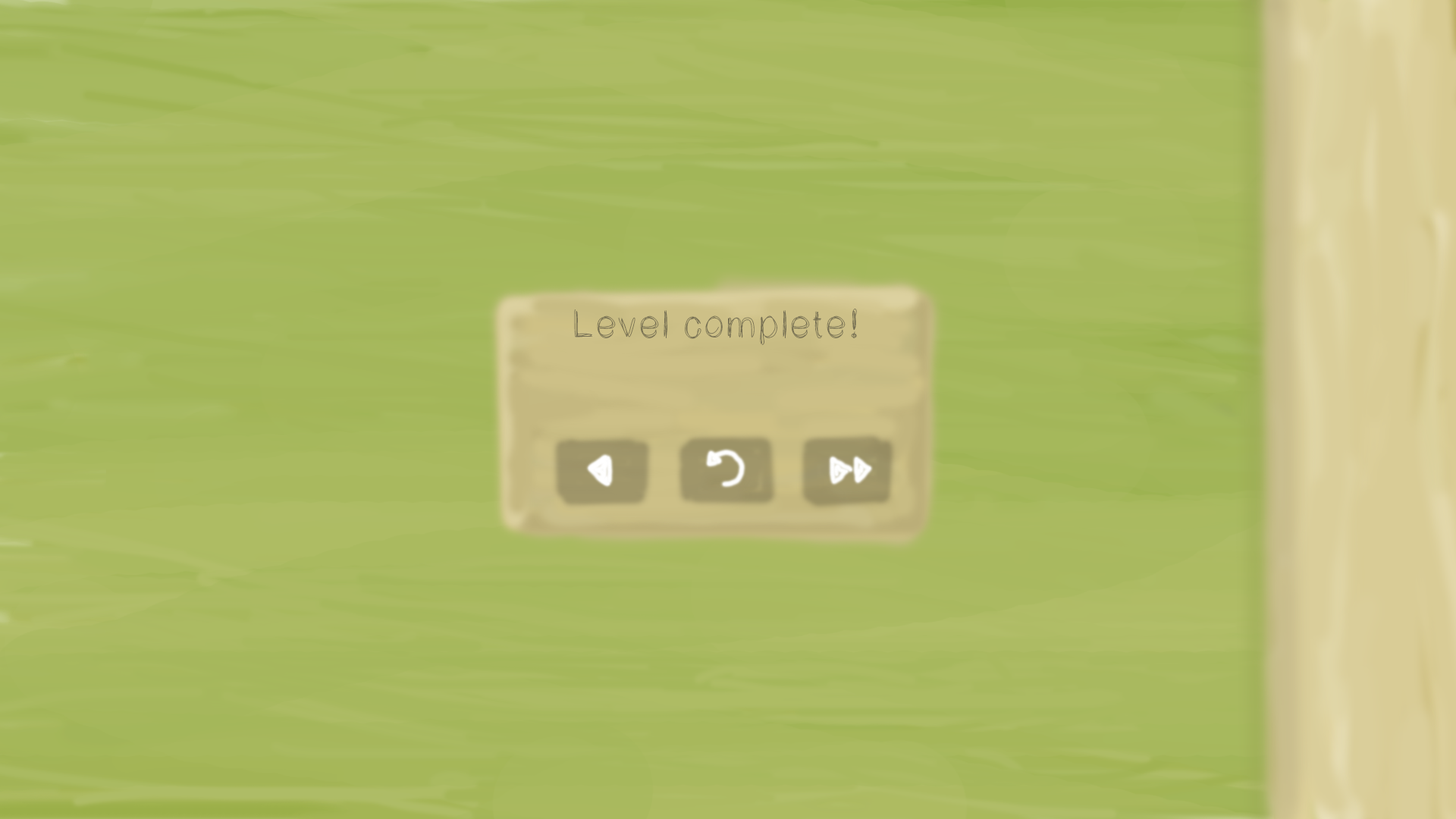
<style>
.page{position:relative;width:1456px;height:819px}
.page>*{position:absolute;margin:0}
.t1{font:39.5px "LightScribe";color:#766f53}
</style>
<div class="page">
<p class="t1" style="left:574px;top:309px;width:283px;height:36px">Level complete!</p>
</div>
